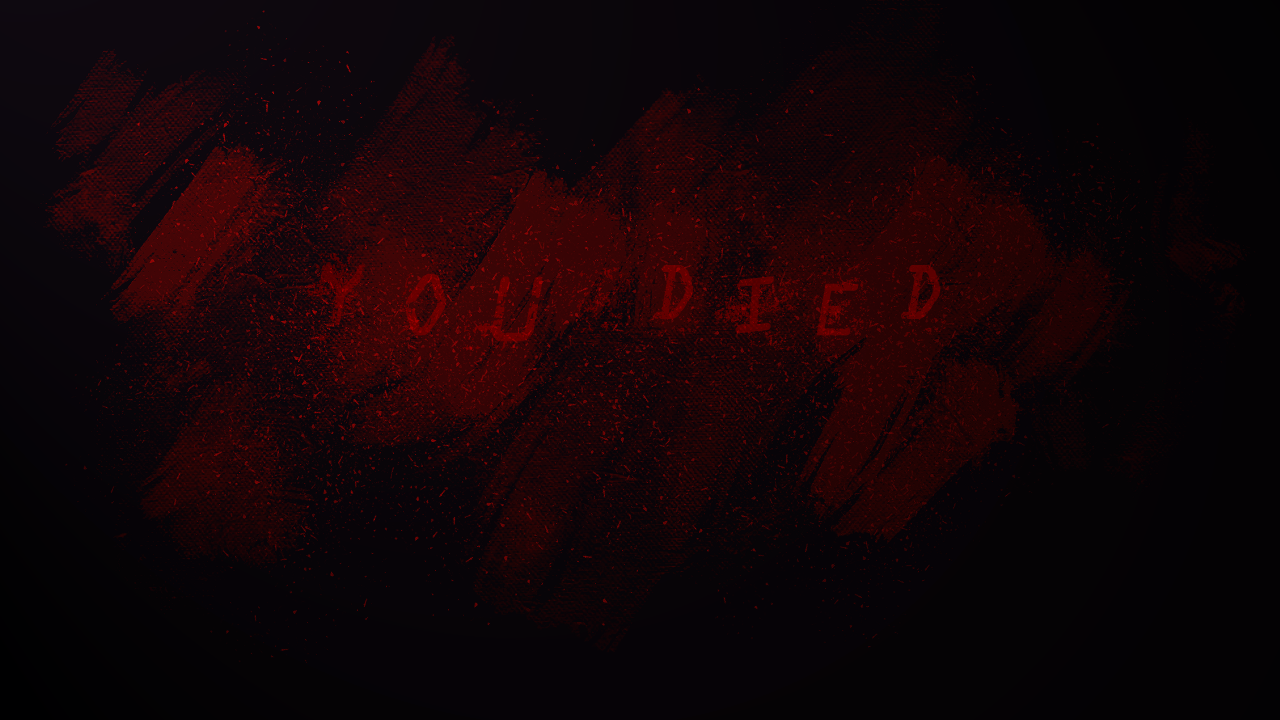
<style>
.page{position:relative;width:1280px;height:720px}
.page>*{position:absolute;margin:0}
.t1{font:100px "StaubigesVergngen";letter-spacing:0.34em;color:#630000;font-style:italic}
</style>
<div class="page">
<p class="t1" style="left:304px;top:251px;width:656px;height:106px">You Died</p>
<p class="t1" style="left:304px;top:251px;width:656px;height:106px">You Died</p>
</div>
